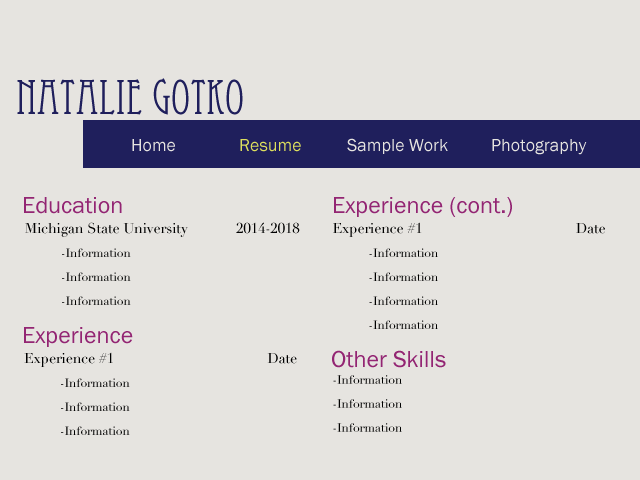
<style>
.page{position:relative;width:640px;height:480px;background:#e6e4e0}
.page>*{position:absolute;margin:0}
.t1{font:48px "EccentricStd";color:#1f1f5c}
.t2{font:18px "FranklinGothic-Book";color:#e6e4e0}
.t3{font:18px "FranklinGothic-Book";color:#dddf5d}
.t4{font:24px "FranklinGothic-Book";color:#932573}
.t5{font:14px/24px "Didot";color:#010101}
.t6{font:12px/24px "Didot";color:#010101}
.t7{font:14px/24px "Didot";color:#000000}
.t8{font:12px/24px "Didot";color:#000000}
</style>
<div class="page">
<p class="t1" style="left:17px;top:78px;width:226px;height:37px">Natalie Gotko</p>
<p class="t2" style="left:132px;top:138px;width:455px;height:17px">Home  <span class="t3">Resume</span>  Sample Work  Photography</p>
<p class="t4" style="left:24px;top:197px;width:98px;height:17px">Education</p>
<p class="t4" style="left:334px;top:197px;width:178px;height:20px">Experience (cont.)</p>
<p class="t5" style="left:25px;top:222px;width:275px;height:83px">Michigan State University         2014-2018<br><span class="t6"> -Information<br> -Information<br> -Information</span></p>
<p class="t6" style="left:333px;top:222px;width:272px;height:107px"><span class="t7">Experience #1           Date<br></span> -Information<br> -Information<br> -Information<br> -Information</p>
<p class="t4" style="left:24px;top:327px;width:109px;height:20px">Experience</p>
<p class="t6" style="left:24px;top:352px;width:273px;height:83px"><span class="t7">Experience #1           Date<br></span> -Information<br> -Information<br> -Information</p>
<p class="t4" style="left:332px;top:350px;width:114px;height:18px">Other Skills</p>
<p class="t8" style="left:333px;top:375px;width:69px;height:57px">-Information<br>-Information<br>-Information</p>
</div>
